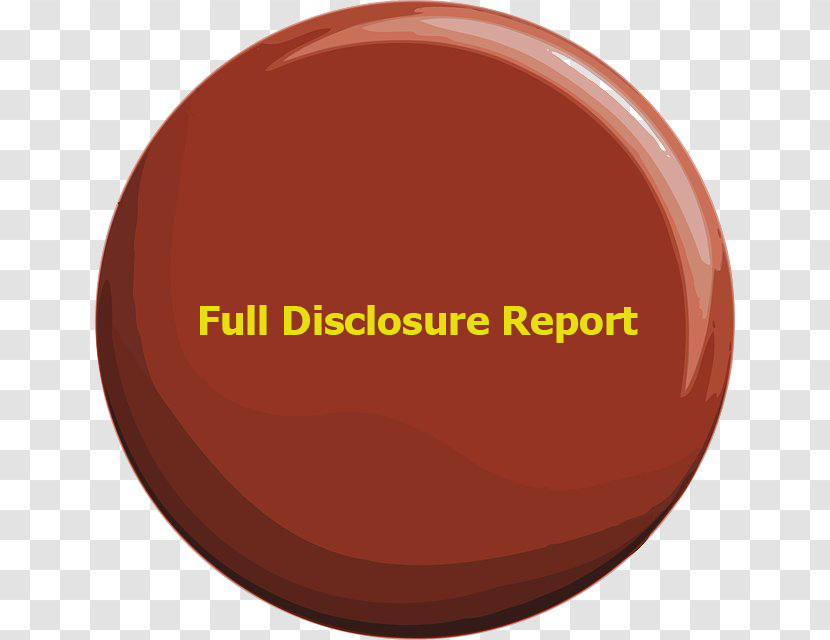
<style>
.page{position:relative;width:830px;height:640px;background:#953423}
.page>*{position:absolute;margin:0}
.t1{font:40px "Tahoma-Bold";color:#e7df0e}
</style>
<div class="page">
<p class="t1" style="left:200px;top:305px;width:438px;height:38px">Full Disclosure Report</p>
</div>
